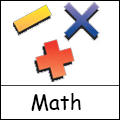
<style>
.page{position:relative;width:120px;height:120px;background:#ffffff}
.page>*{position:absolute;margin:0}
.t1{font:21px "ComicSansMS";color:#000000}
</style>
<div class="page">
<p class="t1" style="left:31px;top:93px;width:50px;height:18px">Math</p>
</div>
